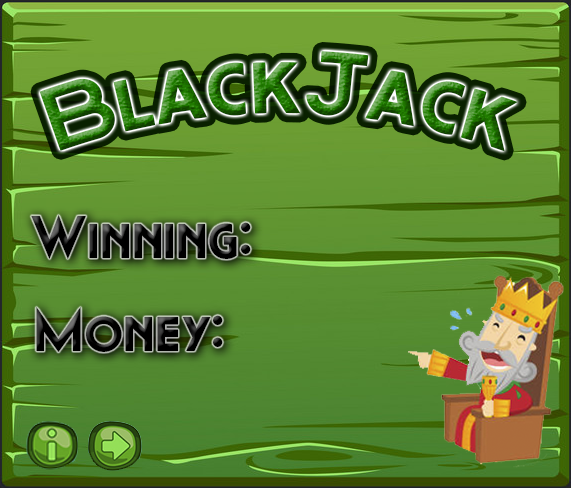
<style>
.page{position:relative;width:571px;height:488px}
.page>*{position:absolute;margin:0}
.t1{font:58.3px "Lavoir-SmallCaps";color:#000000}
</style>
<div class="page">
<p class="t1" style="left:31px;top:215px;width:220px;height:44px">Winning:</p>
<p class="t1" style="left:36px;top:307px;width:187px;height:45px">Money:</p>
</div>
